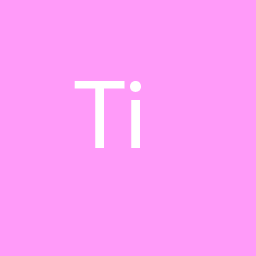
<style>
.page{position:relative;width:256px;height:256px;background:#ff9bf9}
.page>*{position:absolute;margin:0}
.t1{font:100px "MyriadPro-Regular";color:#ffffff}
</style>
<div class="page">
<p class="t1" style="left:74px;top:81px;width:67px;height:67px">Ti</p>
</div>
